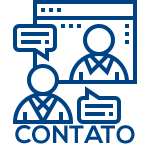
<style>
.page{position:relative;width:150px;height:150px;background:#ffffff}
.page>*{position:absolute;margin:0}
.t1{font:25px "NexaBold";color:#004384}
</style>
<div class="page">
<p class="t1" style="left:15px;top:125px;width:120px;height:19px">CONTATO</p>
</div>
